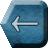
<style>
.page{position:relative;width:48px;height:48px}
.page>*{position:absolute;margin:0}
.t1{font:40.5px "ArialMT";font-weight:bold;scale:0.67 1}
</style>
<div class="page">
<p class="t1" style="left:12px;top:16px;width:26px;height:16px">←</p>
</div>
